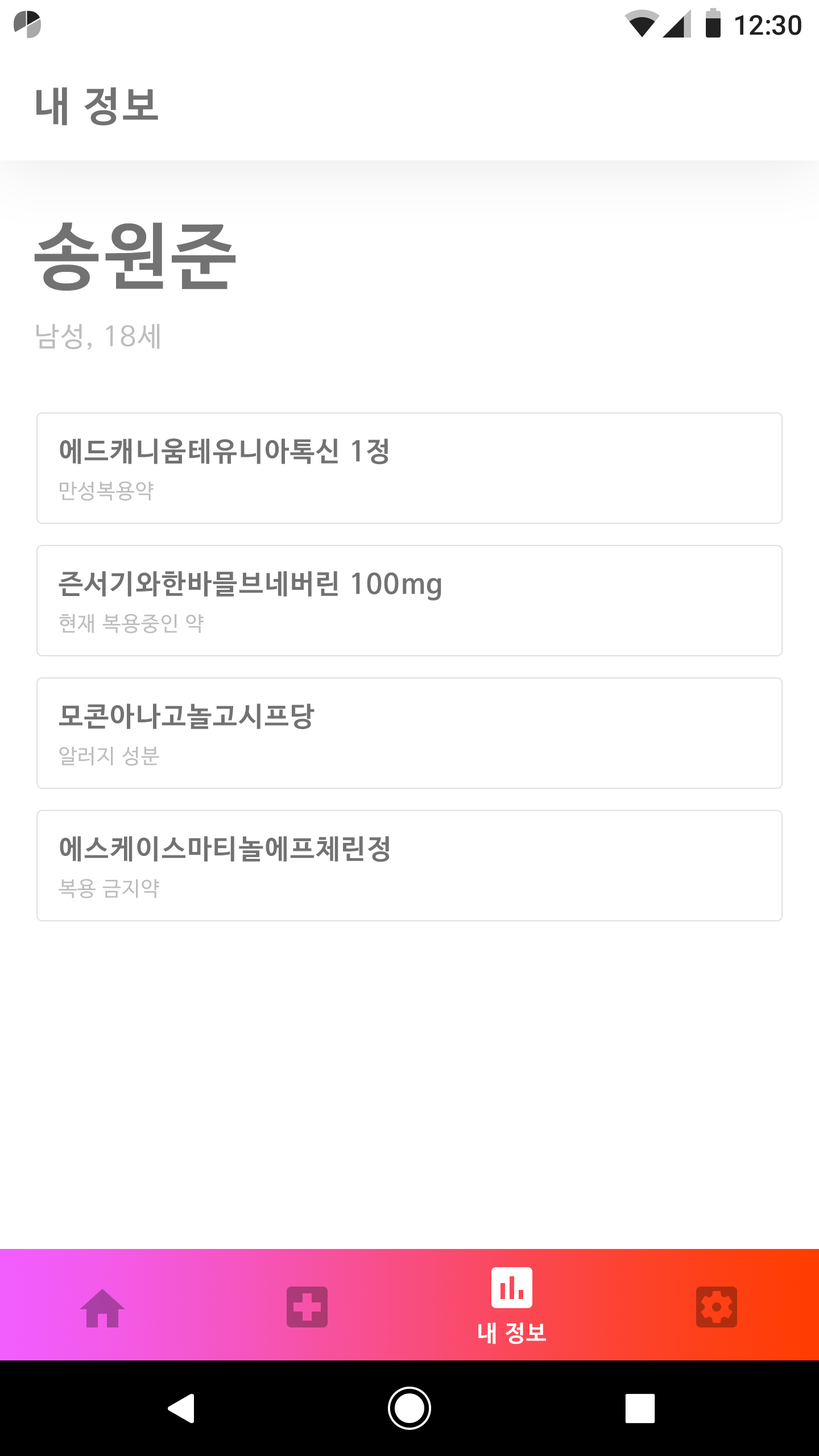
<style>
.page{position:relative;width:819px;height:1456px;background:#ffffff}
.page>*{position:absolute;margin:0}
.t1{font:27.3px "Roboto-Medium";color:#212121}
.t2{font:40.9px "NanumBarunGothicBold";letter-spacing:0.05em;color:#727272}
.t3{font:72.8px "NanumBarunGothicBold";letter-spacing:0.05em;color:#727272}
.t4{font:27.3px "NanumBarunGothic";letter-spacing:0.05em;color:#bdbdbd}
.t5{font:27.3px "NanumBarunGothicBold";letter-spacing:0.05em;color:#727272}
.t6{font:20.5px "NanumBarunGothic";letter-spacing:0.05em;color:#bdbdbd}
.t7{font:22.7px "NanumBarunGothicBold";letter-spacing:0.05em;color:#ffffff}
</style>
<div class="page">
<p class="t1" style="left:735px;top:15px;width:66px;height:20px">12:30</p>
<p class="t2" style="left:36px;top:87px;width:122px;height:39px">내 정보</p>
<p class="t3" style="left:34px;top:222px;width:202px;height:69px">송원준</p>
<p class="t4" style="left:36px;top:324px;width:124px;height:26px">남성, 18세</p>
<p class="t5" style="left:60px;top:439px;width:328px;height:26px">에드캐니움테유니아톡신 1정</p>
<p class="t6" style="left:60px;top:481px;width:94px;height:20px">만성복용약</p>
<p class="t5" style="left:59px;top:571px;width:382px;height:30px">즌서기와한바믈브네버린 100mg</p>
<p class="t6" style="left:59px;top:614px;width:145px;height:20px">현재 복용중인 약</p>
<p class="t5" style="left:59px;top:704px;width:256px;height:25px">모콘아나고놀고시프당</p>
<p class="t6" style="left:59px;top:747px;width:100px;height:19px">알러지 성분</p>
<p class="t5" style="left:60px;top:836px;width:330px;height:26px">에스케이스마티놀에프체린정</p>
<p class="t6" style="left:59px;top:879px;width:100px;height:20px">복용 금지약</p>
<p class="t7" style="left:478px;top:1322px;width:68px;height:22px">내 정보</p>
</div>
